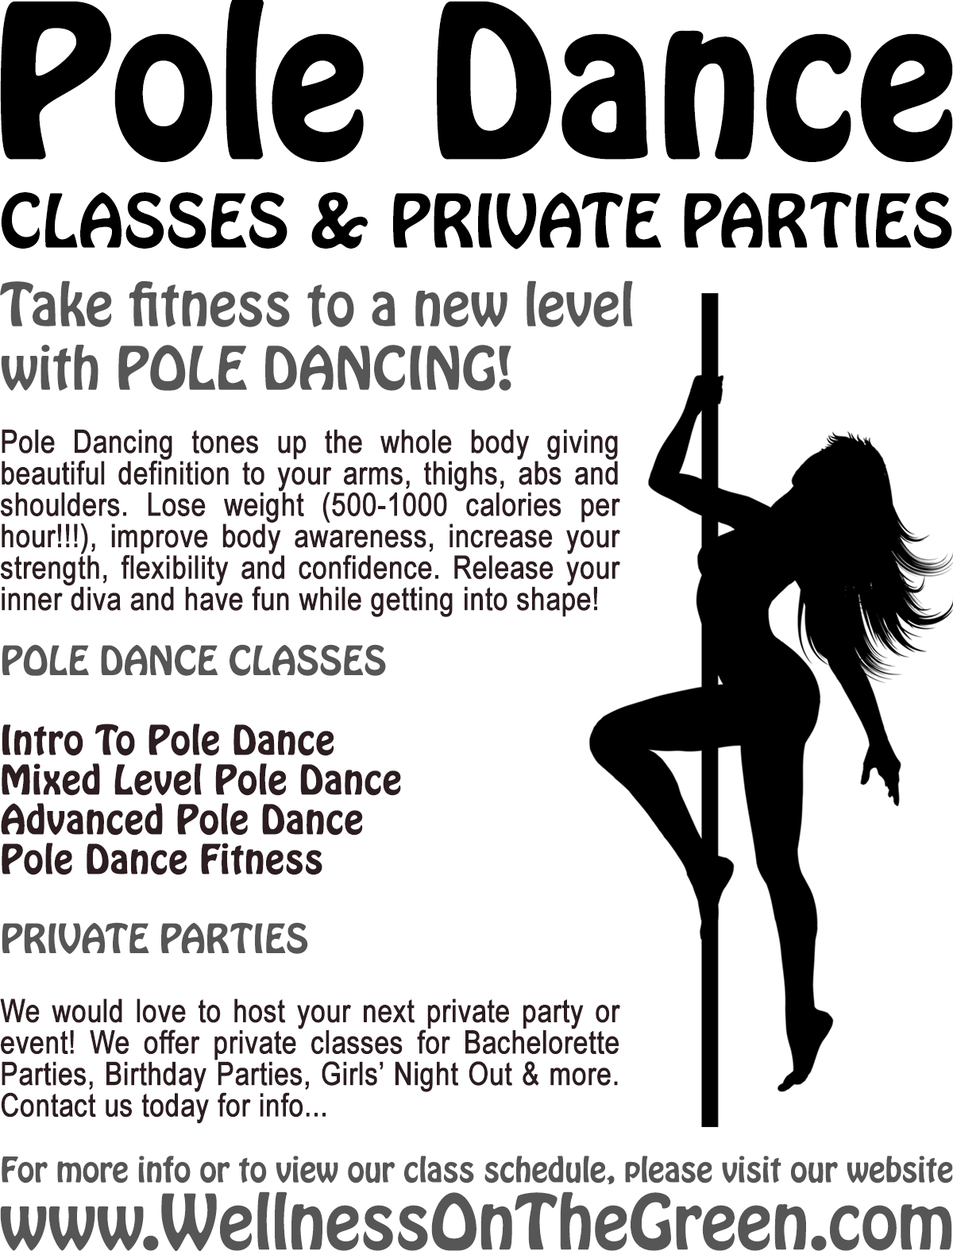
<style>
.page{position:relative;width:953px;height:1251px;background:#ffffff}
.page>*{position:absolute;margin:0}
.t1{font:65.4px "HoboStd";color:#000000}
.t2{font:53px "HoboStd";color:#565656}
.t3{font:31.8px/31.4px "ArialNarrow";color:#2c1d20;font-weight:bold}
.t4{font:35.7px/39.7px "HoboStd";color:#565656}
.t5{font:35.7px/39.7px "HoboStd";color:#2c1d20;font-weight:bold}
.t6{font:30.9px "HoboStd";color:#565656}
.t7{font:67.2px "HoboStd";color:#565656}
</style>
<div class="page">
<p class="t1" style="left:1px;top:192px;width:951px;height:57px">CLASSES &amp; PRIVATE PARTIES</p>
<p class="t2" style="left:0px;top:280px;width:633px;height:111px">Take fitness to a new level<br>with POLE DANCING!</p>
<p class="t3" style="left:0px;top:429px;width:620px;height:695px;text-align:justify">Pole Dancing tones up the whole body giving beautiful definition to your arms, thighs, abs and shoulders. Lose weight (500-1000 calories per hour!!!), improve body awareness, increase your strength, flexibility and confidence. Release your inner diva and have fun while getting into shape!<br><br><span class="t4">POLE DANCE CLASSES<br><br></span><span class="t5">Intro To Pole Dance<br>Mixed Level Pole Dance<br>Advanced Pole Dance<br>Pole Dance Fitness <br><br></span><span class="t4">PRIVATE PARTIES<br><br></span>We would love to host your next private party or event! We offer private classes for Bachelorette Parties, Birthday Parties, Girls’ Night Out &amp; more. Contact us today for info...</p>
<p class="t6" style="left:0px;top:1156px;width:953px;height:96px;text-align:center">For more info or to view our class schedule, please visit our website<br><span class="t7">www.WellnessOnTheGreen.com</span></p>
</div>
